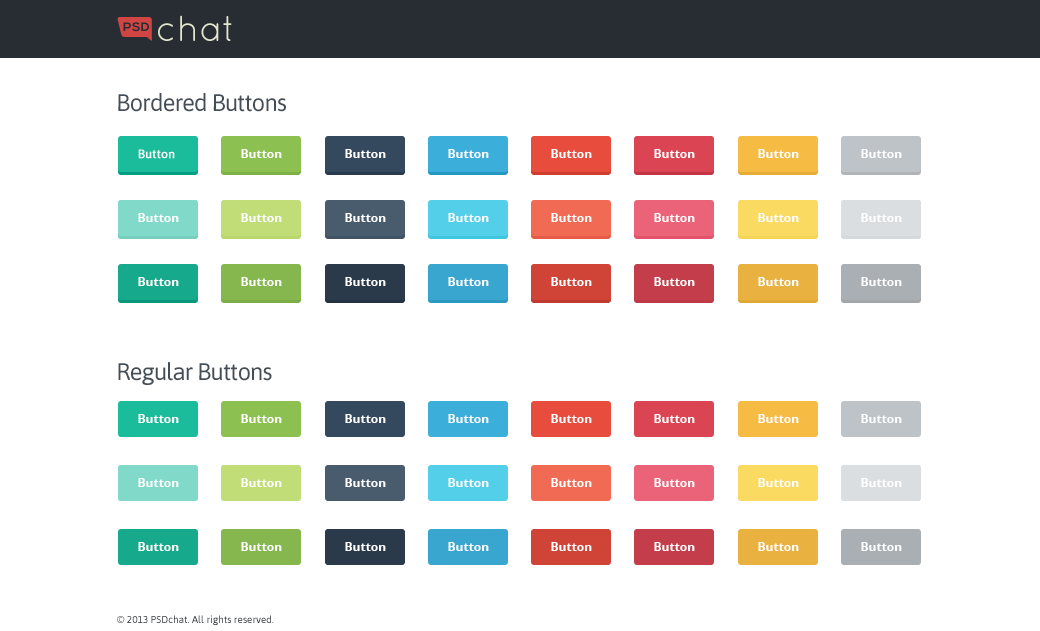
<style>
.page{position:relative;width:1040px;height:631px;background:#ffffff}
.page>*{position:absolute;margin:0}
.t1{font:36px "QuicksandBook-Regular";color:#e5e6cf}
.t2{font:24px "Asap-Regular";letter-spacing:-0.04em;color:#454e56}
.t3{font:12px "Asap-Regular";color:#ffffff;font-weight:bold}
.t4{font:12px "OpenSans-Bold";color:#ffffff}
.t5{font:10px "Asap-Regular";color:#272d32}
</style>
<div class="page">
<p class="t1" style="left:158px;top:15px;width:74px;height:26px">chat</p>
<p class="t2" style="left:118px;top:93px;width:168px;height:19px">Bordered Buttons</p>
<p class="t3" style="left:138px;top:149px;width:37px;height:10px">Button</p>
<p class="t4" style="left:241px;top:149px;width:41px;height:9px">Button</p>
<p class="t4" style="left:345px;top:149px;width:41px;height:9px">Button</p>
<p class="t4" style="left:448px;top:149px;width:41px;height:9px">Button</p>
<p class="t4" style="left:551px;top:149px;width:41px;height:9px">Button</p>
<p class="t4" style="left:654px;top:149px;width:41px;height:9px">Button</p>
<p class="t4" style="left:758px;top:149px;width:41px;height:9px">Button</p>
<p class="t4" style="left:861px;top:149px;width:41px;height:9px">Button</p>
<p class="t4" style="left:138px;top:213px;width:41px;height:9px">Button</p>
<p class="t4" style="left:241px;top:213px;width:41px;height:9px">Button</p>
<p class="t4" style="left:345px;top:213px;width:41px;height:9px">Button</p>
<p class="t4" style="left:448px;top:213px;width:41px;height:9px">Button</p>
<p class="t4" style="left:551px;top:213px;width:41px;height:9px">Button</p>
<p class="t4" style="left:654px;top:213px;width:41px;height:9px">Button</p>
<p class="t4" style="left:758px;top:213px;width:41px;height:9px">Button</p>
<p class="t4" style="left:861px;top:213px;width:41px;height:9px">Button</p>
<p class="t4" style="left:138px;top:277px;width:41px;height:9px">Button</p>
<p class="t4" style="left:241px;top:277px;width:41px;height:9px">Button</p>
<p class="t4" style="left:345px;top:277px;width:41px;height:9px">Button</p>
<p class="t4" style="left:448px;top:277px;width:41px;height:9px">Button</p>
<p class="t4" style="left:551px;top:277px;width:41px;height:9px">Button</p>
<p class="t4" style="left:654px;top:277px;width:41px;height:9px">Button</p>
<p class="t4" style="left:758px;top:277px;width:41px;height:9px">Button</p>
<p class="t4" style="left:861px;top:277px;width:41px;height:9px">Button</p>
<p class="t2" style="left:118px;top:362px;width:154px;height:23px">Regular Buttons</p>
<p class="t4" style="left:138px;top:414px;width:41px;height:9px">Button</p>
<p class="t4" style="left:241px;top:414px;width:41px;height:9px">Button</p>
<p class="t4" style="left:345px;top:414px;width:41px;height:9px">Button</p>
<p class="t4" style="left:448px;top:414px;width:41px;height:9px">Button</p>
<p class="t4" style="left:551px;top:414px;width:41px;height:9px">Button</p>
<p class="t4" style="left:654px;top:414px;width:41px;height:9px">Button</p>
<p class="t4" style="left:758px;top:414px;width:41px;height:9px">Button</p>
<p class="t4" style="left:861px;top:414px;width:41px;height:9px">Button</p>
<p class="t4" style="left:138px;top:478px;width:41px;height:9px">Button</p>
<p class="t4" style="left:241px;top:478px;width:41px;height:9px">Button</p>
<p class="t4" style="left:345px;top:478px;width:41px;height:9px">Button</p>
<p class="t4" style="left:448px;top:478px;width:41px;height:9px">Button</p>
<p class="t4" style="left:551px;top:478px;width:41px;height:9px">Button</p>
<p class="t4" style="left:654px;top:478px;width:41px;height:9px">Button</p>
<p class="t4" style="left:758px;top:478px;width:41px;height:9px">Button</p>
<p class="t4" style="left:861px;top:478px;width:41px;height:9px">Button</p>
<p class="t4" style="left:138px;top:542px;width:41px;height:9px">Button</p>
<p class="t4" style="left:241px;top:542px;width:41px;height:9px">Button</p>
<p class="t4" style="left:345px;top:542px;width:41px;height:9px">Button</p>
<p class="t4" style="left:448px;top:542px;width:41px;height:9px">Button</p>
<p class="t4" style="left:551px;top:542px;width:41px;height:9px">Button</p>
<p class="t4" style="left:654px;top:542px;width:41px;height:9px">Button</p>
<p class="t4" style="left:758px;top:542px;width:41px;height:9px">Button</p>
<p class="t4" style="left:861px;top:542px;width:41px;height:9px">Button</p>
<p class="t5" style="left:117px;top:615px;width:157px;height:10px">© 2013 PSDchat. All rights reserved.</p>
</div>
